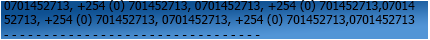
<style>
.page{position:relative;width:430px;height:40px}
.page>*{position:absolute;margin:0}
.t1{font:12px "Tahoma";color:#050000}
</style>
<div class="page">
<p class="t1" style="left:4px;top:0px;width:411px;height:36px">0701452713, +254 (0) 701452713, 0701452713, +254 (0) 701452713,07014<br>52713, +254 (0) 701452713, 0701452713, +254 (0) 701452713,0701452713<br>- - - - - - - - - - - - - - - - - - - - - - - - - - - - - - - -</p>
</div>
